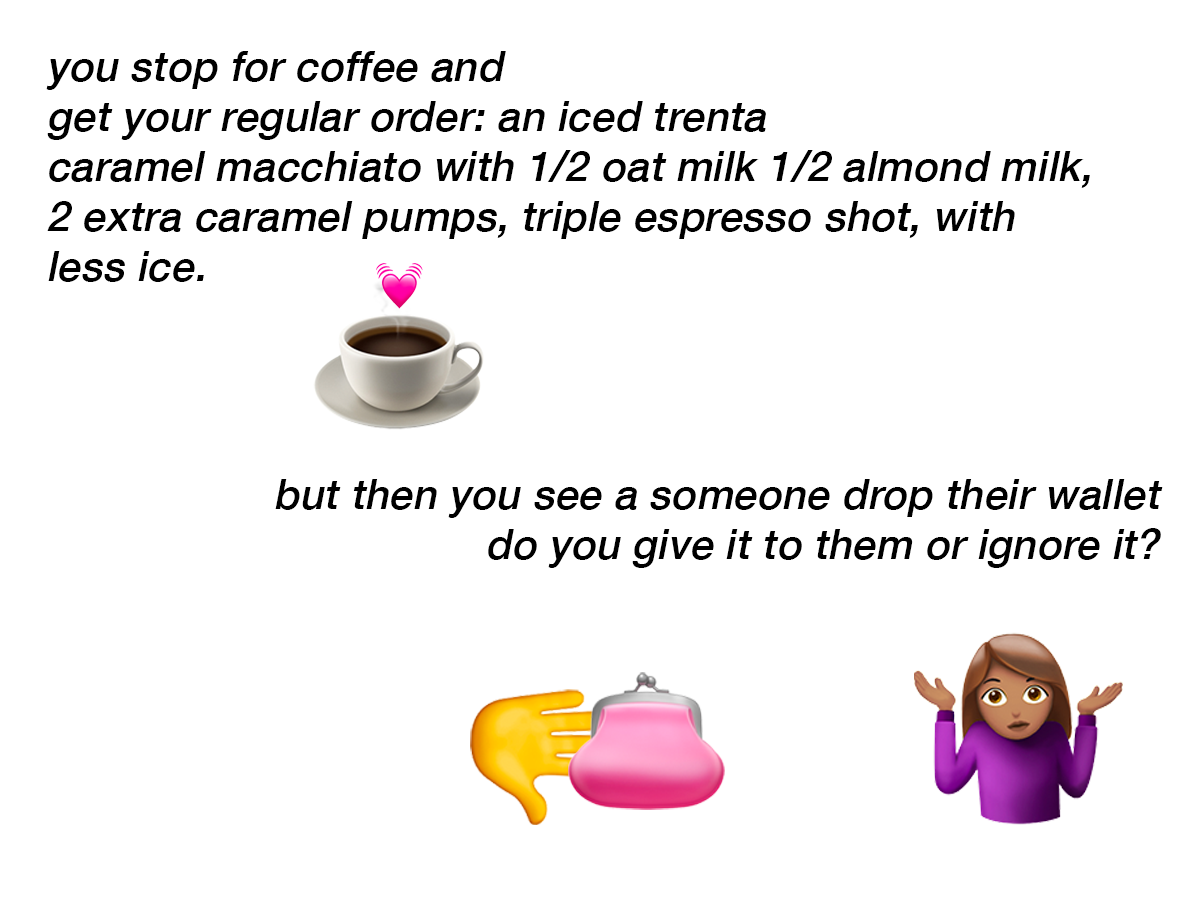
<style>
.page{position:relative;width:1200px;height:900px;background:#ffffff}
.page>*{position:absolute;margin:0}
.t1{font:41.7px "HelveticaNeue-Medium";letter-spacing:0.01em;color:#000000;font-style:italic}
</style>
<div class="page">
<p class="t1" style="left:46px;top:51px;width:1044px;height:231px">you stop for coffee and<br>get your regular order: an iced trenta <br>caramel macchiato with 1/2 oat milk 1/2 almond milk, <br>2 extra caramel pumps, triple espresso shot, with <br>less ice.</p>
<p class="t1" style="left:275px;top:479px;width:888px;height:89px;text-align:right">but then you see a someone drop their wallet<br>do you give it to them or ignore it?</p>
</div>
